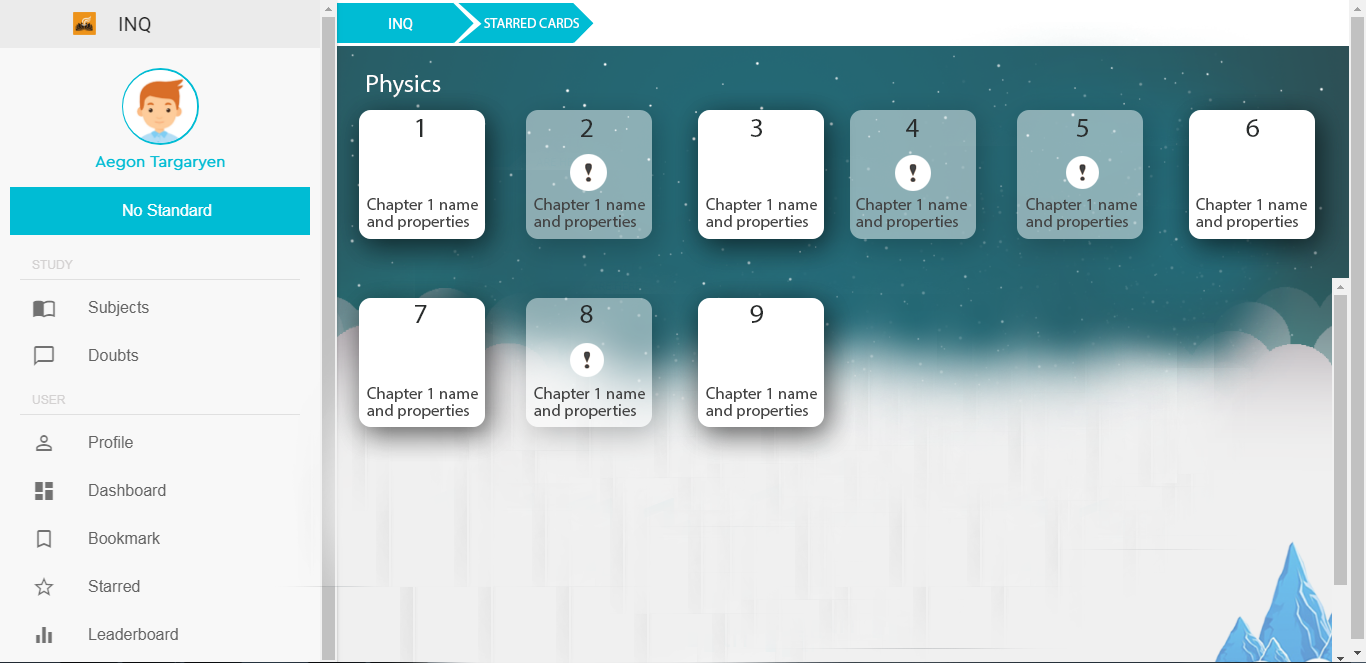
<style>
.page{position:relative;width:1366px;height:663px}
.page>*{position:absolute;margin:0}
.t1{font:13.9px "MyriadPro-Regular";letter-spacing:0.004em;color:#ffffff}
.t2{font:24.6px "MyriadPro-Regular";letter-spacing:0.004em;color:#ffffff}
.t3{font:27.8px "MyriadPro-Regular";letter-spacing:0.004em;color:#292c2c}
.t4{font:16.7px/16.7px "MyriadPro-Regular";letter-spacing:0.004em;color:#444444}
</style>
<div class="page">
<p class="t1" style="left:484px;top:18px;width:95px;height:10px">STARRED CARDS</p>
<p class="t2" style="left:367px;top:74px;width:74px;height:24px">Physics</p>
<p class="t3" style="left:416px;top:119px;width:7px;height:18px">1</p>
<p class="t3" style="left:581px;top:119px;width:12px;height:18px">2</p>
<p class="t3" style="left:750px;top:119px;width:12px;height:18px">3</p>
<p class="t3" style="left:906px;top:119px;width:13px;height:18px">4</p>
<p class="t3" style="left:1076px;top:119px;width:12px;height:18px">5</p>
<p class="t3" style="left:1246px;top:119px;width:13px;height:18px">6</p>
<p class="t4" style="left:367px;top:198px;width:111px;height:32px">Chapter 1 name <br>and properties</p>
<p class="t4" style="left:534px;top:198px;width:111px;height:32px">Chapter 1 name <br>and properties</p>
<p class="t4" style="left:706px;top:198px;width:111px;height:32px">Chapter 1 name <br>and properties</p>
<p class="t4" style="left:856px;top:198px;width:111px;height:32px">Chapter 1 name <br>and properties</p>
<p class="t4" style="left:1026px;top:198px;width:111px;height:32px">Chapter 1 name <br>and properties</p>
<p class="t4" style="left:1196px;top:198px;width:111px;height:32px">Chapter 1 name <br>and properties</p>
<p class="t3" style="left:415px;top:305px;width:12px;height:18px">7</p>
<p class="t3" style="left:580px;top:305px;width:13px;height:18px">8</p>
<p class="t3" style="left:750px;top:305px;width:13px;height:18px">9</p>
<p class="t4" style="left:367px;top:387px;width:111px;height:32px">Chapter 1 name <br>and properties</p>
<p class="t4" style="left:534px;top:387px;width:111px;height:32px">Chapter 1 name <br>and properties</p>
<p class="t4" style="left:706px;top:387px;width:111px;height:32px">Chapter 1 name <br>and properties</p>
</div>
